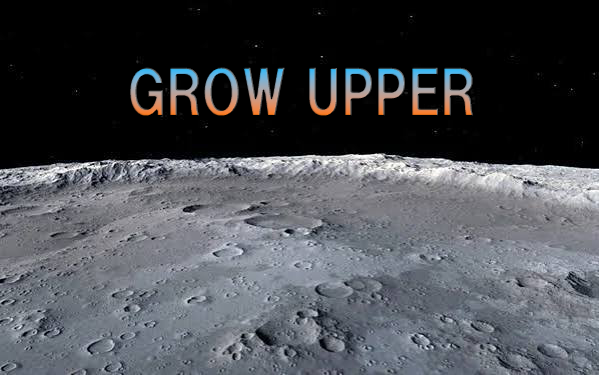
<style>
.page{position:relative;width:599px;height:375px;background:#000000}
.page>*{position:absolute;margin:0}
.t1{font:60px "HGPSoeiKakugothicUB"}
</style>
<div class="page">
<p class="t1" style="left:129px;top:67px;width:345px;height:50px">GROW UPPER</p>
</div>
